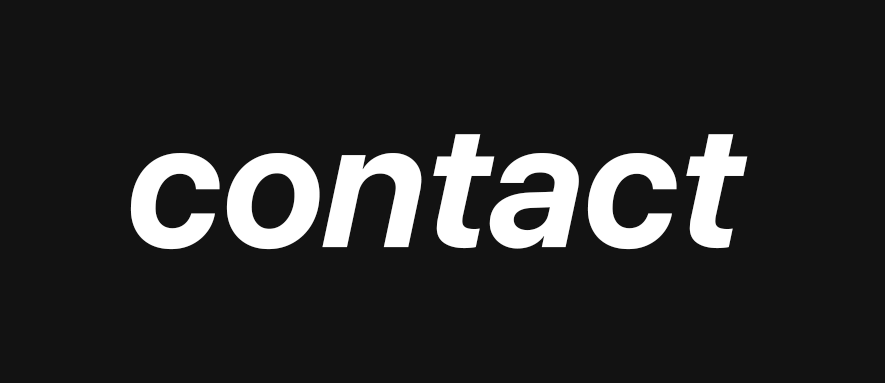
<style>
.page{position:relative;width:885px;height:383px;background:#121212}
.page>*{position:absolute;margin:0}
.t1{font:175px "SFPro-BoldItalic";color:#ffffff}
</style>
<div class="page">
<p class="t1" style="left:130px;top:134px;width:618px;height:116px">contact</p>
</div>
